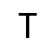
<style>
.page{position:relative;width:50px;height:50px;background:#ffffff}
.page>*{position:absolute;margin:0}
.t1{font:36px "MyriadPro-Regular";color:#000000}
</style>
<div class="page">
<p class="t1" style="left:18px;top:13px;width:19px;height:25px">T</p>
</div>
